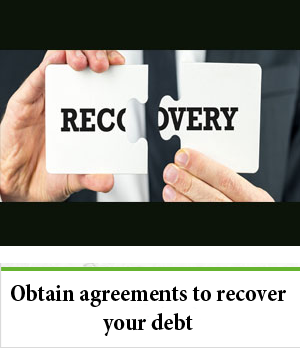
<style>
.page{position:relative;width:300px;height:350px;background:#0c1409}
.page>*{position:absolute;margin:0}
.t1{font:24px "MinionPro-BoldCn";color:#000000}
</style>
<div class="page">
<p class="t1" style="left:11px;top:284px;width:275px;height:52px;text-align:center">Obtain agreements to recover<br>your debt</p>
</div>
